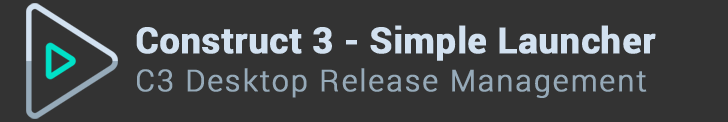
<style>
.page{position:relative;width:728px;height:122px;background:#333333}
.page>*{position:absolute;margin:0}
.t1{font:36px/38px "Roboto-Bold";color:#d2e1f0;font-weight:bold}
.t2{font:30px/38px "Roboto-Light";letter-spacing:0.05em;color:#96aab9;font-weight:bold}
</style>
<div class="page">
<p class="t1" style="left:136px;top:25px;width:520px;height:73px">Construct 3 - Simple Launcher<br><span class="t2">C3 Desktop Release Management</span></p>
</div>
